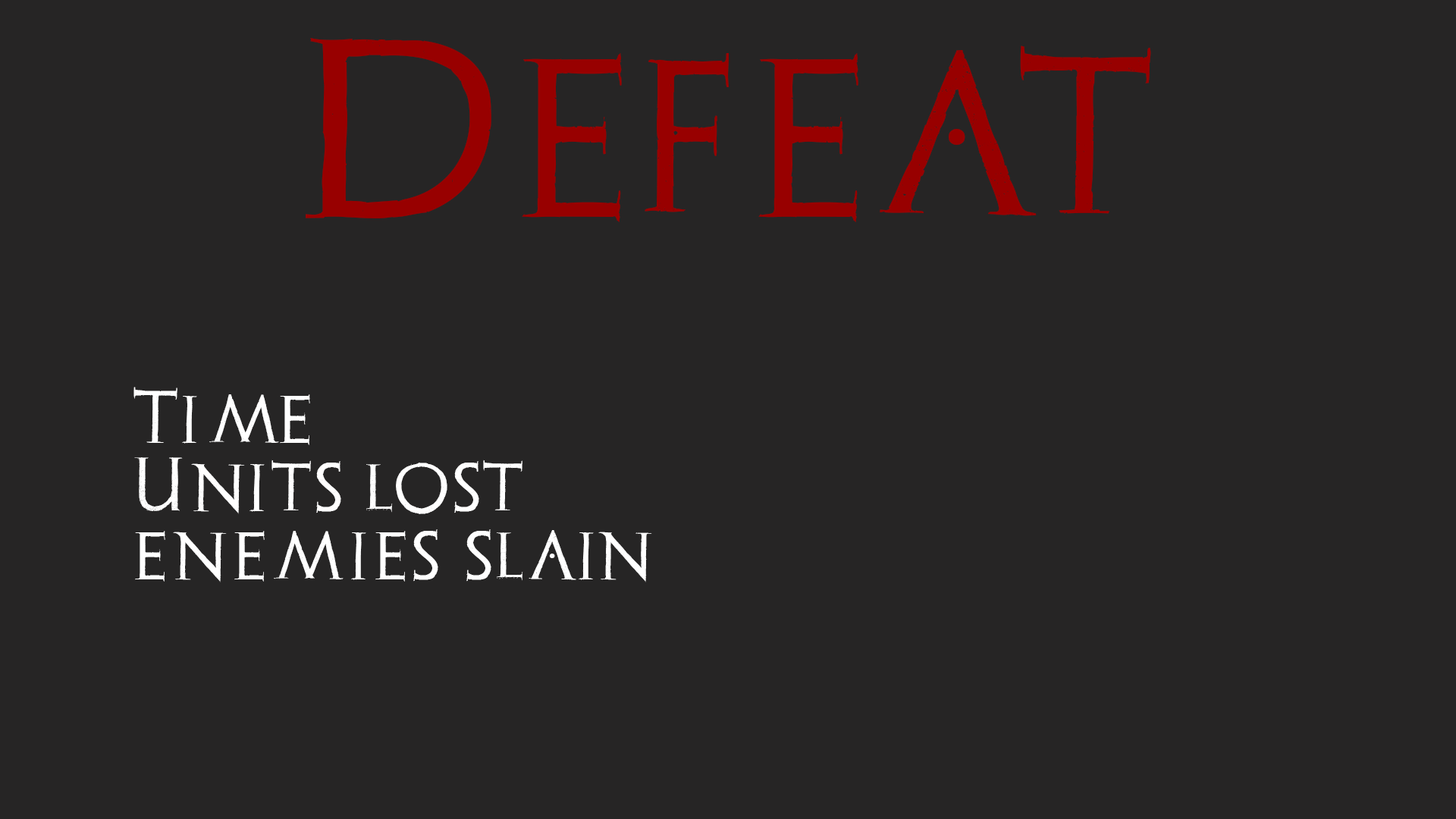
<style>
.page{position:relative;width:1456px;height:819px;background:#262525}
.page>*{position:absolute;margin:0}
.t1{font:189.6px "Archeologicaps";color:#980000}
.t2{font:56.9px "Archeologicaps";color:#ffffff}
</style>
<div class="page">
<p class="t1" style="left:306px;top:38px;width:845px;height:184px">Defeat</p>
<p class="t2" style="left:133px;top:387px;width:519px;height:195px">Time:;<br>Units lost<br>enemies slain</p>
</div>
